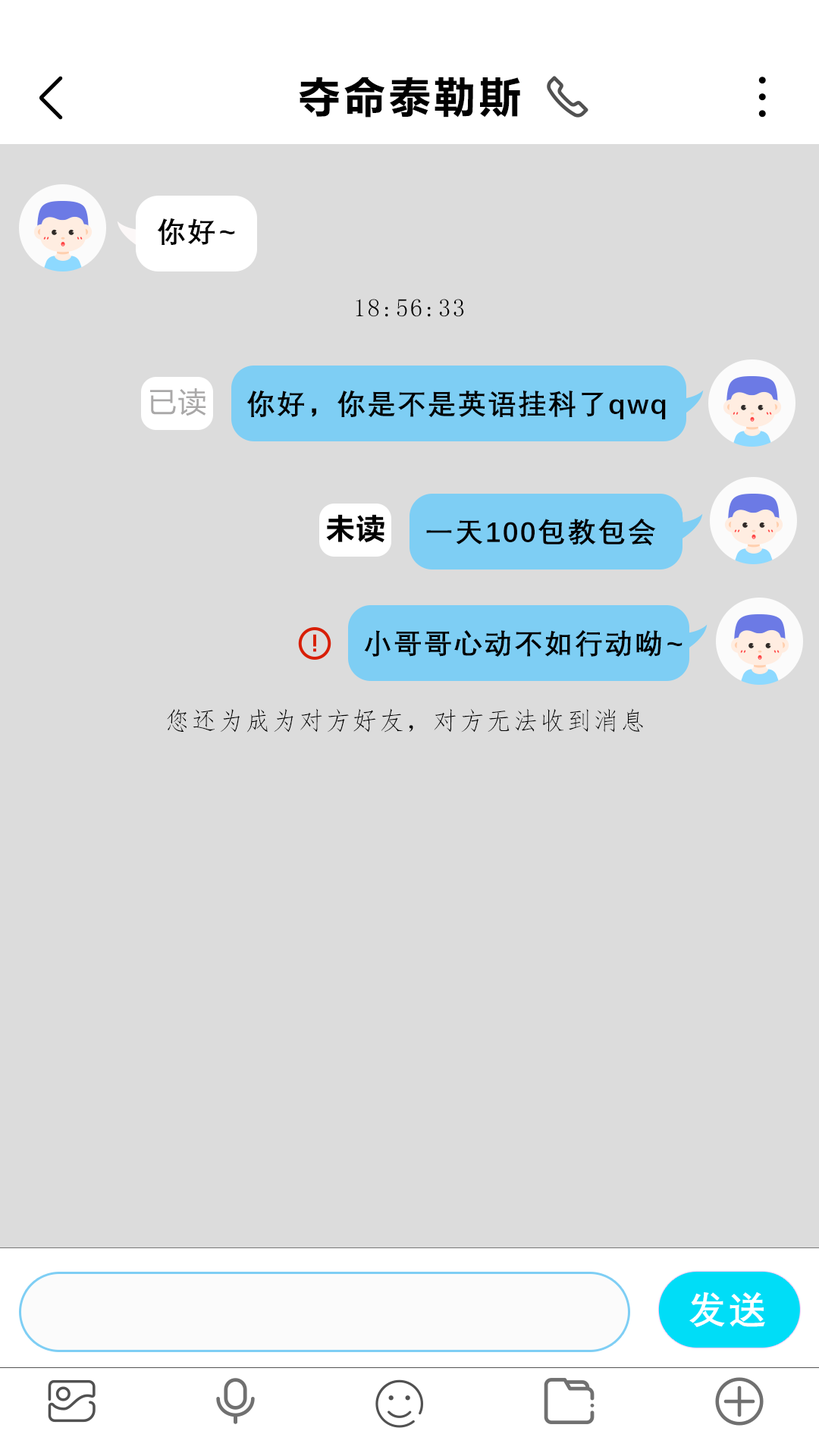
<style>
.page{position:relative;width:819px;height:1456px;background:#dcdcdc}
.page>*{position:absolute;margin:0}
.t1{font:41.1px "MicrosoftYaHei-Bold";letter-spacing:0.1em;color:#010101}
.t2{font:28.4px "DengXian-Bold";letter-spacing:0.06em;color:#010101}
.t3{font:25.3px "FangSong";letter-spacing:0.06em;color:#010101}
.t4{font:28.4px "MicrosoftYaHeiUI";letter-spacing:0.06em;color:#a9a8a8}
.t5{font:28.4px "MicrosoftYaHeiUI-Bold";letter-spacing:0.06em;color:#000000}
.t6{font:37.9px "DengXian-Bold";letter-spacing:0.06em;color:#ffffff}
</style>
<div class="page">
<p class="t1" style="left:299px;top:77px;width:221px;height:41px">夺命泰勒斯</p>
<p class="t2" style="left:157px;top:218px;width:78px;height:27px">你好~</p>
<p class="t3" style="left:356px;top:299px;width:108px;height:18px">18:56:33</p>
<p class="t4" style="left:150px;top:388px;width:56px;height:28px">已读</p>
<p class="t2" style="left:246px;top:390px;width:420px;height:29px">你好，你是不是英语挂科了qwq</p>
<p class="t5" style="left:326px;top:514px;width:58px;height:29px">未读</p>
<p class="t2" style="left:426px;top:518px;width:230px;height:28px">一天100包教包会</p>
<p class="t2" style="left:364px;top:629px;width:318px;height:28px">小哥哥心动不如行动呦~</p>
<p class="t3" style="left:167px;top:708px;width:476px;height:25px">您还为成为对方好友，对方无法收到消息</p>
<p class="t6" style="left:689px;top:1292px;width:76px;height:35px">发送</p>
</div>
